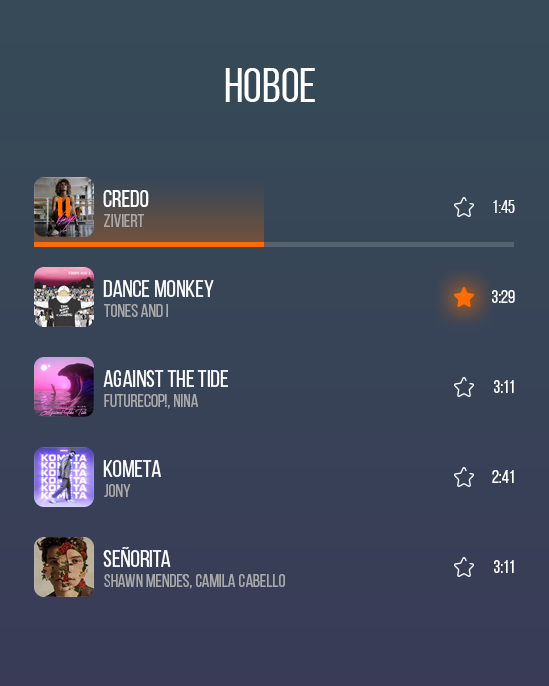
<style>
.page{position:relative;width:549px;height:686px}
.page>*{position:absolute;margin:0}
.t1{font:48px "BebasNeueRegular";color:#ffffff}
.t2{font:24px "BebasNeueRegular";color:#ffffff}
.t3{font:18px "BebasNeueRegular";color:#ffffff}
.t4{font:18px "BebasNeueRegular";color:#aaaaaa}
</style>
<div class="page">
<p class="t1" style="left:225px;top:68px;width:90px;height:34px">новое</p>
<p class="t2" style="left:103px;top:190px;width:46px;height:17px">CREDO</p>
<p class="t3" style="left:493px;top:200px;width:22px;height:13px">1:45</p>
<p class="t4" style="left:104px;top:214px;width:40px;height:13px">ziviert</p>
<p class="t2" style="left:103px;top:280px;width:111px;height:17px">dance monkey</p>
<p class="t3" style="left:492px;top:290px;width:23px;height:13px">3:29</p>
<p class="t4" style="left:104px;top:304px;width:64px;height:13px">tones and i</p>
<p class="t2" style="left:103px;top:369px;width:125px;height:18px">Against the Tide</p>
<p class="t3" style="left:494px;top:380px;width:20px;height:13px">3:11</p>
<p class="t4" style="left:104px;top:394px;width:94px;height:15px">Futurecop!, Nina</p>
<p class="t2" style="left:103px;top:460px;width:58px;height:17px">kometa</p>
<p class="t3" style="left:492px;top:470px;width:22px;height:13px">2:41</p>
<p class="t4" style="left:104px;top:484px;width:27px;height:13px">jony</p>
<p class="t2" style="left:103px;top:546px;width:68px;height:21px">Señorita</p>
<p class="t3" style="left:494px;top:560px;width:20px;height:13px">3:11</p>
<p class="t4" style="left:104px;top:574px;width:181px;height:15px">Shawn Mendes, Camila Cabello</p>
</div>
